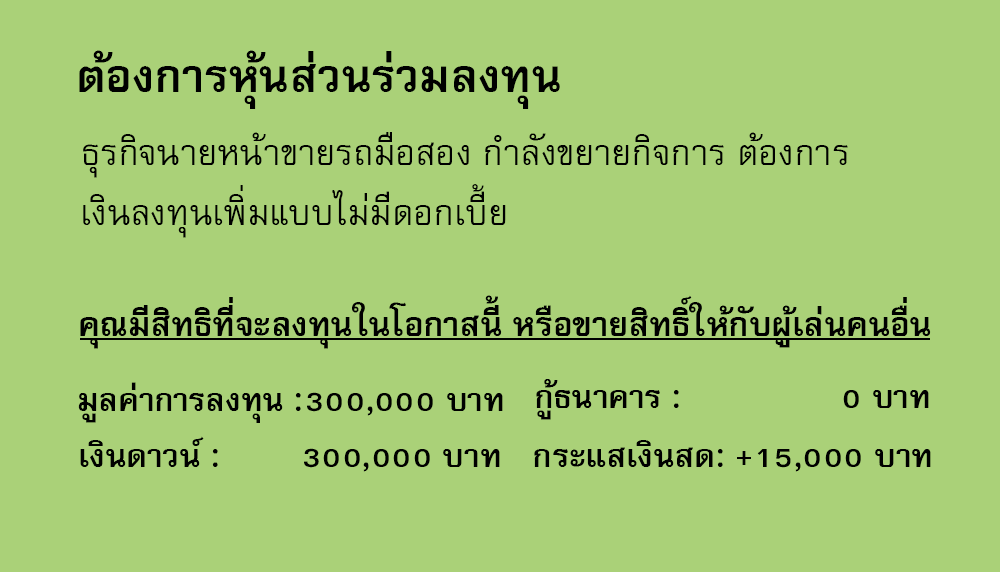
<style>
.page{position:relative;width:1000px;height:572px;background:#aad178}
.page>*{position:absolute;margin:0}
.t1{font:64px "FreesiaUPCBold";color:#000000}
.t2{font:50px/60px "FreesiaUPC";color:#000000}
.t3{font:47px "FreesiaUPCBold";color:#000000}
.t4{font:45px "FreesiaUPCBold";color:#000000}
</style>
<div class="page">
<p class="t1" style="left:79px;top:50px;width:481px;height:59px">ต้องการหุ้นส่วนร่วมลงทุน</p>
<p class="t2" style="left:83px;top:132px;width:765px;height:106px">ธุรกิจนายหน้าขายรถมือสอง กำลังขยายกิจการ ต้องการ<br>เงินลงทุนเพิ่มแบบไม่มีดอกเบี้ย</p>
<p class="t3" style="left:80px;top:295px;width:851px;height:54px">คุณมีสิทธิที่จะลงทุนในโอกาสนี้ หรือขายสิทธิ์ให้กับผู้เล่นคนอื่น</p>
<p class="t4" style="left:78px;top:382px;width:425px;height:41px">มูลค่าการลงทุน :300,000 บาท</p>
<p class="t4" style="left:536px;top:379px;width:393px;height:41px">กู้ธนาคาร :                0 บาท</p>
<p class="t4" style="left:80px;top:436px;width:420px;height:36px">เงินดาวน์ :        300,000 บาท</p>
<p class="t4" style="left:534px;top:440px;width:397px;height:32px">กระแสเงินสด: +15,000 บาท</p>
</div>
